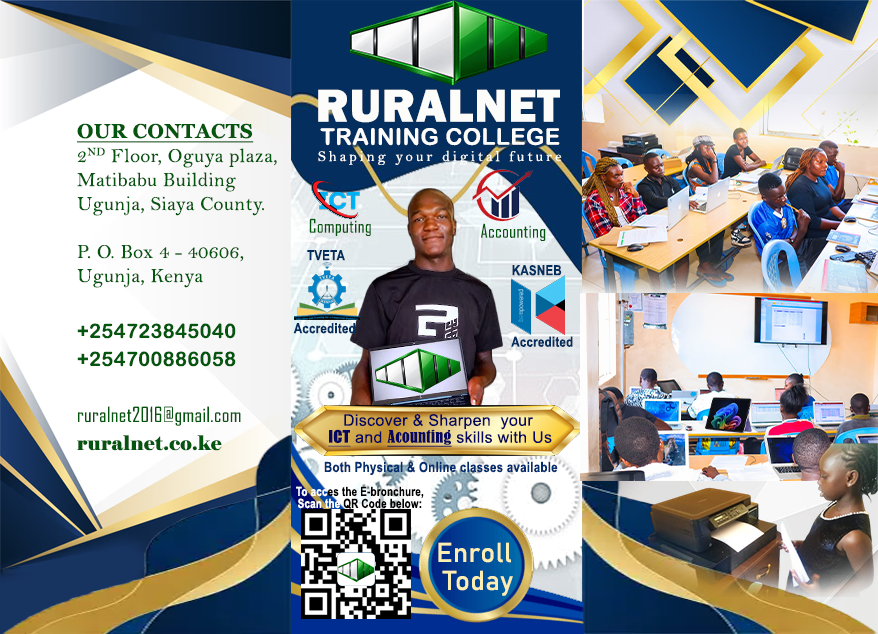
<style>
.page{position:relative;width:878px;height:634px}
.page>*{position:absolute;margin:0}
.t1{font:23px/23px "ArialRoundedMTBold";letter-spacing:0.02em;color:#fcfcfb}
.t2{font:48px/23px "FranklinGothic-Heavy";letter-spacing:0.02em;color:#fcfcfb}
.t3{font:20px/24px "BellMT";letter-spacing:0.02em;color:#04560e}
.t4{font:20px/28px "Georgia-Bold";letter-spacing:0.02em;color:#04560e;text-decoration:underline}
.t5{font:20px/28px "ArialRoundedMTBold";letter-spacing:0.02em;color:#04560e}
.t6{font:20px/28px "AgencyFB-Reg";letter-spacing:0.02em;color:#04560e}
.t7{font:20px/28px "Elephant-Regular";letter-spacing:0.02em;color:#04560e}
.t8{font:15px "BellMT";letter-spacing:0.2em;color:#ffffff}
.t9{font:18px "AgencyFB-Reg";letter-spacing:0.02em;color:#04560e}
.t10{font:14px "ArialNarrow-Bold";letter-spacing:0.02em;color:#042e5e}
.t11{font:16px/17px "ArialMT";letter-spacing:0.02em;color:#06085f}
.t12{font:16px/17px "Impact";letter-spacing:0.02em;color:#06085f;text-decoration:underline}
.t13{font:16px/17px "BernardMT-Condensed";letter-spacing:0.02em;color:#06085f;text-decoration:underline}
.t14{font:14px "ArialNarrow-Bold";letter-spacing:0.02em;color:#042e6e}
.t15{font:12.7px/12px "ArialNarrow-Bold";letter-spacing:0.02em;color:#000000;scale:0.94 1}
.t16{font:12.7px/12px "ArialNarrow-Bold";letter-spacing:0.02em;color:#ffffff;scale:0.94 1}
.t17{font:27px/28px "Bahnschrift";letter-spacing:0.02em;color:#fdeeb2}
</style>
<div class="page">
<p class="t1" style="left:318px;top:89px;width:242px;height:57px;text-align:center"><span class="t2">RURALNET <br></span>TRAINING COLLEGE</p>
<p class="t3" style="left:77px;top:123px;width:200px;height:328px"><span class="t4">OUR CONTACTS<br></span>2ND Floor, Oguya plaza,<br>Matibabu Building<br>Ugunja, Siaya County.<br><br>P. O. Box 4 - 40606, <br>Ugunja, Kenya<br><br><span class="t5">+254723845040<br>+254700886058<br><br></span><span class="t6">ruralnet2016@gmail.com<br></span><span class="t7">ruralnet.co.ke</span></p>
<p class="t8" style="left:318px;top:150px;width:244px;height:15px">Shaping your digital future</p>
<p class="t9" style="left:309px;top:218px;width:62px;height:18px">Computing</p>
<p class="t9" style="left:481px;top:223px;width:65px;height:18px">Accounting</p>
<p class="t10" style="left:307px;top:250px;width:38px;height:11px">TVETA</p>
<p class="t10" style="left:512px;top:265px;width:50px;height:11px">KASNEB</p>
<p class="t10" style="left:293px;top:323px;width:62px;height:11px">Accredited</p>
<p class="t10" style="left:511px;top:336px;width:62px;height:11px">Accredited</p>
<p class="t11" style="left:328px;top:414px;width:224px;height:33px;text-align:center">Discover &amp; Sharpen  your <br><span class="t12">ICT</span> and <span class="t13">Acounting</span> skills with Us</p>
<p class="t14" style="left:324px;top:461px;width:234px;height:14px">Both Physical &amp; Online classes available</p>
<p class="t15" style="left:296px;top:486px;width:128px;height:23px;text-align:center"><span class="t16">To acc</span>es the E-bronchure,<br><span class="t16">Scan the</span> QR Code below:</p>
<p class="t17" style="left:438px;top:542px;width:75px;height:54px;text-align:center">Enroll <br>Today</p>
</div>
